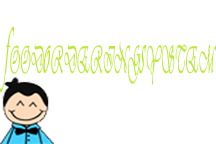
<style>
.page{position:relative;width:216px;height:144px;background:#ffffff}
.page>*{position:absolute;margin:0}
.t1{font:40.5px "Vivaldii";letter-spacing:0.04em;color:#b9e937;scale:0.28 1}
.t2{font:69.4px "Vivaldii";letter-spacing:0.04em;color:#b9e937;scale:0.28 1}
</style>
<div class="page">
<p class="t1" style="left:0px;top:26px;width:216px;height:67px"><span class="t2">f</span>OOD<span class="t2">o</span>RDERING<span class="t2">s</span>YSTEM</p>
</div>
